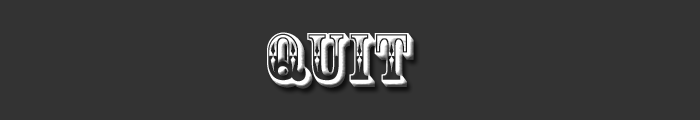
<style>
.page{position:relative;width:700px;height:120px;background:#333333}
.page>*{position:absolute;margin:0}
.t1{font:72px "RosewoodStd-Regular"}
</style>
<div class="page">
<p class="t1" style="left:267px;top:32px;width:147px;height:57px">quit</p>
</div>
